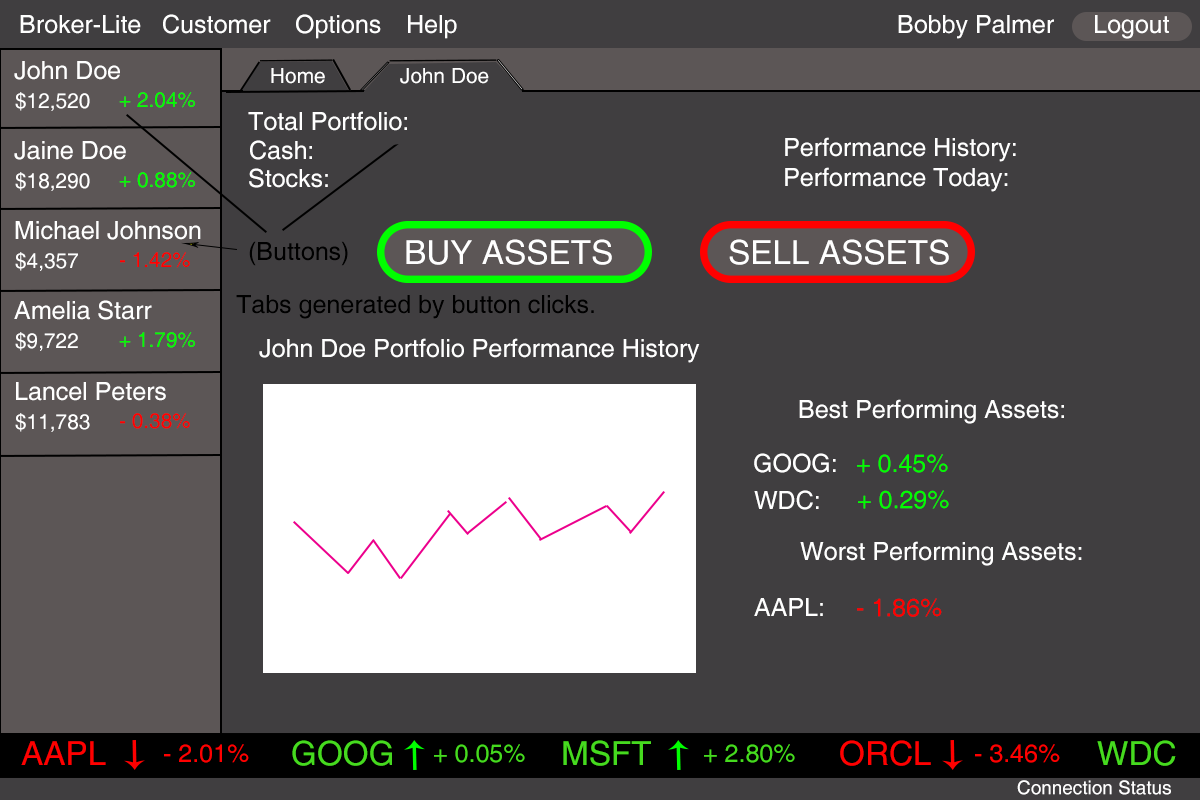
<style>
.page{position:relative;width:1200px;height:800px;background:#403e40}
.page>*{position:absolute;margin:0}
.t1{font:25px "Helvetica";color:#ffffff}
.t2{font:20.8px "Helvetica";color:#ffffff}
.t3{font:20.8px "Helvetica";color:#00ff00}
.t4{font:25px "Helvetica";color:#000000}
.t5{font:33.3px "Helvetica";color:#ffffff}
.t6{font:20.8px "Helvetica";color:#ff0000}
.t7{font:25px "Helvetica";color:#00ff00}
.t8{font:25px "Helvetica";color:#ff0000}
.t9{font:33.3px "Helvetica";color:#ff0000}
.t10{font:33.3px "Helvetica";color:#46da1f}
.t11{font:25px "Helvetica";color:#46da1f}
.t12{font:18.9px "Helvetica";color:#ffffff}
</style>
<div class="page">
<p class="t1" style="left:20px;top:15px;width:121px;height:19px">Broker-Lite</p>
<p class="t1" style="left:163px;top:14px;width:108px;height:20px">Customer</p>
<p class="t1" style="left:296px;top:14px;width:85px;height:25px">Options</p>
<p class="t1" style="left:408px;top:15px;width:49px;height:24px">Help</p>
<p class="t1" style="left:898px;top:15px;width:156px;height:24px">Bobby Palmer</p>
<p class="t1" style="left:1095px;top:15px;width:74px;height:24px">Logout</p>
<p class="t1" style="left:14px;top:61px;width:106px;height:19px">John Doe</p>
<p class="t2" style="left:271px;top:68px;width:54px;height:16px">Home</p>
<p class="t2" style="left:400px;top:68px;width:89px;height:16px">John Doe</p>
<p class="t2" style="left:15px;top:92px;width:75px;height:19px">$12,520</p>
<p class="t3" style="left:119px;top:92px;width:76px;height:16px">+ 2.04%</p>
<p class="t1" style="left:248px;top:111px;width:159px;height:20px">Total Portfolio:</p>
<p class="t1" style="left:785px;top:137px;width:231px;height:25px">Performance History:</p>
<p class="t1" style="left:14px;top:141px;width:112px;height:19px">Jaine Doe</p>
<p class="t1" style="left:250px;top:140px;width:62px;height:20px">Cash:</p>
<p class="t2" style="left:15px;top:172px;width:75px;height:19px">$18,290</p>
<p class="t3" style="left:119px;top:172px;width:76px;height:16px">+ 0.88%</p>
<p class="t1" style="left:249px;top:168px;width:79px;height:20px">Stocks:</p>
<p class="t1" style="left:785px;top:167px;width:223px;height:25px">Performance Today:</p>
<p class="t1" style="left:15px;top:221px;width:186px;height:19px">Michael Johnson</p>
<p class="t4" style="left:249px;top:241px;width:99px;height:25px">(Buttons)</p>
<p class="t5" style="left:406px;top:239px;width:206px;height:26px">BUY ASSETS</p>
<p class="t5" style="left:729px;top:239px;width:220px;height:26px">SELL ASSETS</p>
<p class="t2" style="left:15px;top:252px;width:63px;height:19px">$4,357</p>
<p class="t6" style="left:120px;top:252px;width:70px;height:16px">- 1.42%</p>
<p class="t1" style="left:14px;top:300px;width:138px;height:20px">Amelia Starr</p>
<p class="t4" style="left:236px;top:295px;width:358px;height:24px">Tabs generated by button clicks.</p>
<p class="t2" style="left:15px;top:332px;width:63px;height:19px">$9,722</p>
<p class="t3" style="left:119px;top:332px;width:76px;height:16px">+ 1.79%</p>
<p class="t1" style="left:259px;top:338px;width:441px;height:25px">John Doe Portfolio Performance History</p>
<p class="t1" style="left:16px;top:382px;width:150px;height:19px">Lancel Peters</p>
<p class="t1" style="left:799px;top:399px;width:265px;height:25px">Best Performing Assets:</p>
<p class="t2" style="left:15px;top:413px;width:75px;height:19px">$11,783</p>
<p class="t6" style="left:120px;top:413px;width:70px;height:16px">- 0.38%</p>
<p class="t1" style="left:754px;top:453px;width:82px;height:20px">GOOG:</p>
<p class="t7" style="left:857px;top:454px;width:91px;height:19px">+ 0.45%</p>
<p class="t1" style="left:754px;top:490px;width:65px;height:20px">WDC:</p>
<p class="t7" style="left:858px;top:490px;width:91px;height:19px">+ 0.29%</p>
<p class="t1" style="left:800px;top:541px;width:282px;height:25px">Worst Performing Assets:</p>
<p class="t1" style="left:754px;top:598px;width:69px;height:18px">AAPL:</p>
<p class="t8" style="left:857px;top:598px;width:85px;height:19px">- 1.86%</p>
<p class="t9" style="left:21px;top:741px;width:85px;height:24px">AAPL</p>
<p class="t8" style="left:164px;top:744px;width:85px;height:19px">- 2.01%</p>
<p class="t10" style="left:292px;top:740px;width:100px;height:26px">GOOG</p>
<p class="t11" style="left:434px;top:744px;width:91px;height:19px">+ 0.05%</p>
<p class="t10" style="left:563px;top:740px;width:88px;height:26px">MSFT</p>
<p class="t11" style="left:704px;top:744px;width:91px;height:19px">+ 2.80%</p>
<p class="t9" style="left:840px;top:740px;width:91px;height:26px">ORCL</p>
<p class="t8" style="left:975px;top:744px;width:85px;height:19px">- 3.46%</p>
<p class="t10" style="left:1097px;top:740px;width:79px;height:26px">WDC</p>
<p class="t12" style="left:1017px;top:780px;width:154px;height:15px">Connection Status</p>
</div>
